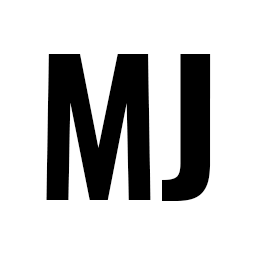
<style>
.page{position:relative;width:256px;height:256px;background:#ffffff}
.page>*{position:absolute;margin:0}
.t1{font:180px "Oswald-DemiBold";color:#000000}
</style>
<div class="page">
<p class="t1" style="left:46px;top:54px;width:165px;height:147px">MJ</p>
</div>
